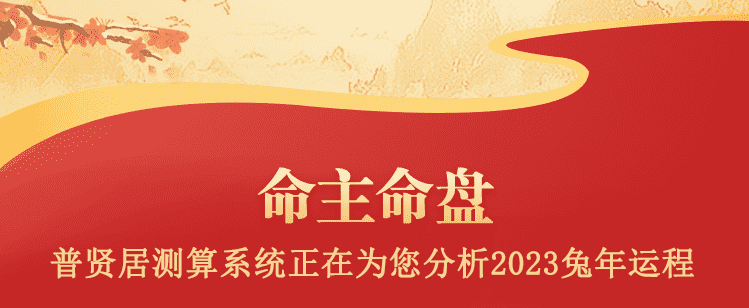
<style>
.page{position:relative;width:749px;height:308px;background:#c52727}
.page>*{position:absolute;margin:0}
.t1{font:33px "SimSun";color:#f7d593;font-weight:bold}
</style>
<div class="page">
<p class="t1" style="left:50px;top:246px;width:644px;height:33px">普贤居测算系统正在为您分析2023兔年运程</p>
</div>
